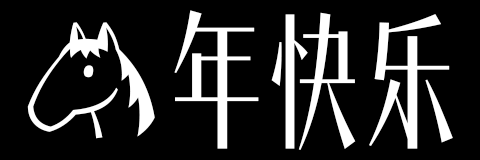
<style>
.page{position:relative;width:480px;height:160px;background:#000000}
.page>*{position:absolute;margin:0}
.t1{font:150px "SartSans-SemiLight";color:#ffffff}
</style>
<div class="page">
<p class="t1" style="left:27px;top:10px;width:426px;height:140px">🐴年快乐</p>
</div>
